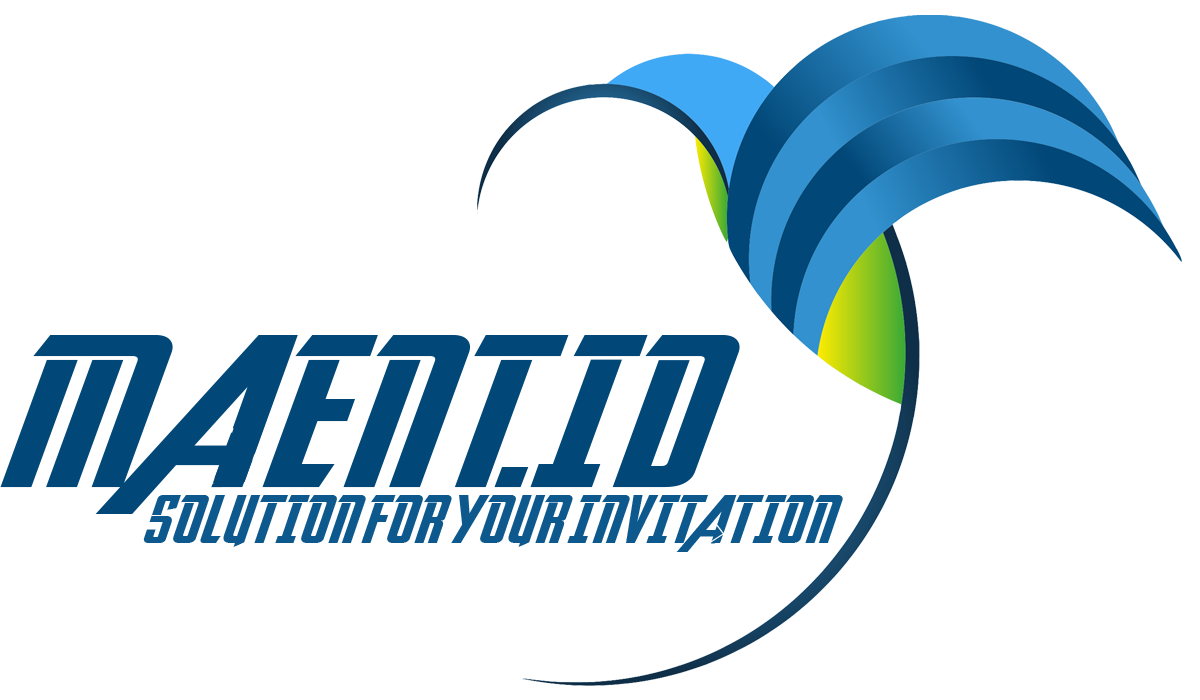
<style>
.page{position:relative;width:1200px;height:700px;background:#ffffff}
.page>*{position:absolute;margin:0}
.t1{font:47.3px "AvengeanceHeroicAvengerNormal";color:#0d598d;scale:1.15 1}
</style>
<div class="page">
<p class="t1" style="left:143px;top:495px;width:700px;height:57px">SOLUTION FOR YOUR INVITATION</p>
</div>
